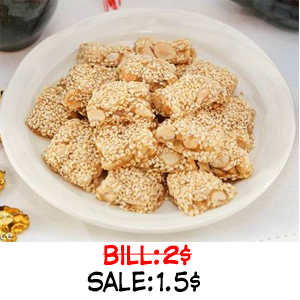
<style>
.page{position:relative;width:300px;height:300px}
.page>*{position:absolute;margin:0}
.t1{font:24px "000-AstroCity-[TeddyBear]";color:#ff0000;font-weight:bold;scale:0.85 1}
.t2{font:24px "000-AstroCity-[TeddyBear]";color:#000000;scale:0.85 1}
</style>
<div class="page">
<p class="t1" style="left:103px;top:244px;width:89px;height:22px">bill:2$</p>
<p class="t2" style="left:87px;top:271px;width:114px;height:22px">sale:1.5$</p>
</div>
